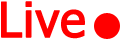
<style>
.page{position:relative;width:122px;height:41px;background:#ffffff}
.page>*{position:absolute;margin:0}
.t1{font:48px "Tahoma";color:#ff0000;font-weight:bold}
</style>
<div class="page">
<p class="t1" style="left:1px;top:1px;width:84px;height:38px">Live</p>
</div>
